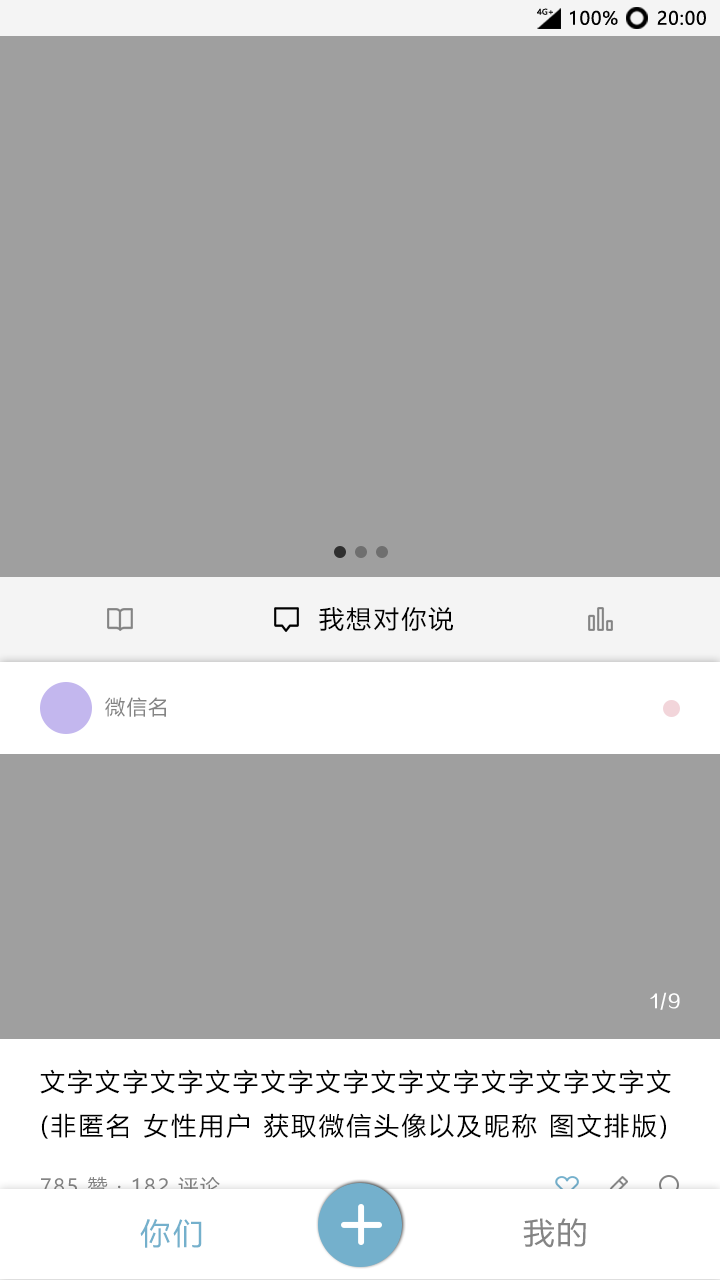
<style>
.page{position:relative;width:720px;height:1280px;background:#9f9f9f}
.page>*{position:absolute;margin:0}
.t1{font:7.8px "MicrosoftYaHei";letter-spacing:0.01em;color:#0e0e0e;scale:1.03 1}
.t2{font:18px "MicrosoftYaHei";letter-spacing:0.05em;color:#000000}
.t3{font:25px "MicrosoftYaHei";letter-spacing:0.1em;color:#000000}
.t4{font:20px "MicrosoftYaHei";letter-spacing:0.08em;color:#848484}
.t5{font:17.8px "FZZZHUNHJW--GB1-0";letter-spacing:0.1em;color:#ffffff}
.t6{font:25.1px "MicrosoftYaHei";letter-spacing:0.1em;color:#000000}
.t7{font:30px "MicrosoftYaHei";letter-spacing:0.1em;color:#74b0cc}
.t8{font:30px "MicrosoftYaHei";letter-spacing:0.08em;color:#848484;scale:1.03 1}
</style>
<div class="page">
<p class="t1" style="left:537px;top:8px;width:16px;height:7px">4G+</p>
<p class="t2" style="left:570px;top:10px;width:48px;height:15px">100%</p>
<p class="t2" style="left:657px;top:10px;width:49px;height:15px">20:00</p>
<p class="t3" style="left:319px;top:607px;width:134px;height:24px">我想对你说</p>
<p class="t4" style="left:105px;top:697px;width:61px;height:20px">微信名</p>
<p class="t5" style="left:650px;top:992px;width:30px;height:18px">1/9</p>
<p class="t6" style="left:40px;top:1069px;width:631px;height:70px">文字文字文字文字文字文字文字文字文字文字文字文<br>(非匿名 女性用户 获取微信头像以及昵称 图文排版)</p>
<p class="t4" style="left:41px;top:1176px;width:179px;height:21px">785 赞 · 182 评论</p>
<p class="t7" style="left:140px;top:1219px;width:62px;height:29px">你们</p>
<p class="t8" style="left:523px;top:1218px;width:63px;height:30px">我的</p>
</div>
